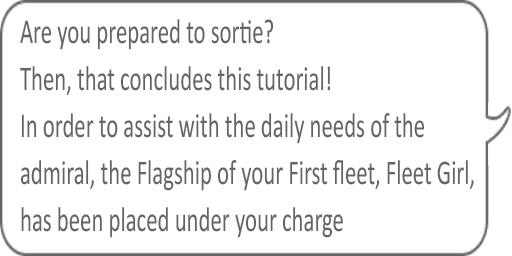
<style>
.page{position:relative;width:512px;height:256px;background:#ffffff}
.page>*{position:absolute;margin:0}
.t1{font:35px/47px "Calibri";color:#636563;scale:0.65 1}
</style>
<div class="page">
<p class="t1" style="left:20px;top:19px;width:454px;height:219px">Are you prepared to sortie?<br>Then, that concludes this tutorial!<br>In order to assist with the daily needs of the<br>admiral, the Flagship of your First fleet, Fleet Girl,<br>has been placed under your charge</p>
</div>
